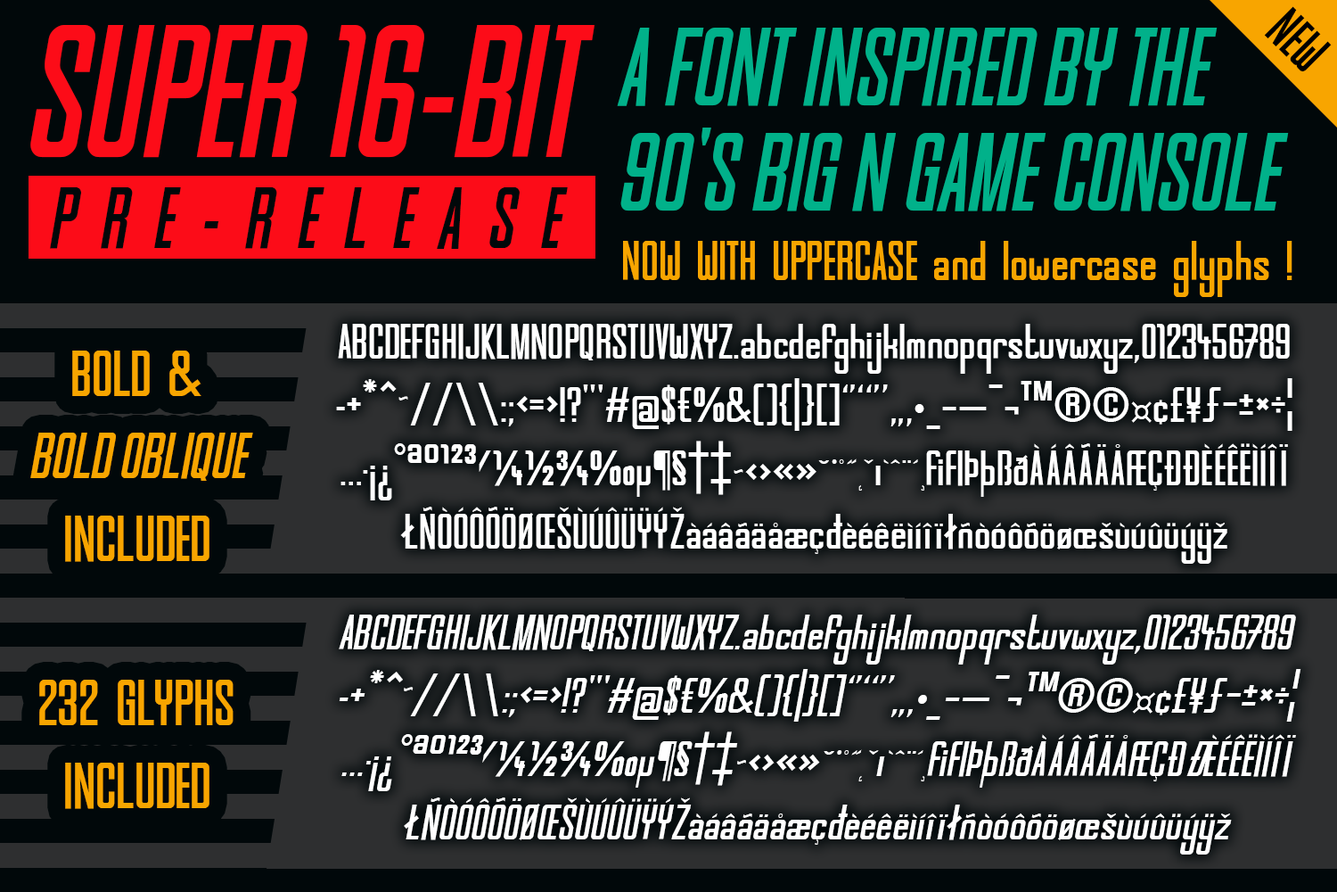
<style>
.page{position:relative;width:1337px;height:892px;background:#01080a}
.page>*{position:absolute;margin:0}
.t1{font:60.2px "Super16Bit-Bold";color:#000000}
.t2{font:196.7px "Super16Bit-BoldOblique";color:#fc0c18;scale:0.96 1}
.t3{font:116.4px/105.3px "Super16Bit-BoldOblique";color:#01b18a;text-transform:uppercase;scale:0.96 1}
.t4{font:91.3px "Super16Bit-BoldOblique";letter-spacing:0.3em;color:#01080a;scale:0.96 1}
.t5{font:58.2px "Super16Bit-Bold";color:#f8a500}
.t6{font:52.7px "Super16Bit-Bold";color:#ffffff}
.t7{font:68.6px "Super16Bit-Bold";color:#f8a500}
.t8{font:68.6px "Super16Bit-BoldOblique";color:#f8a500}
.t9{font:52.7px "Super16Bit-BoldOblique";color:#ffffff}
</style>
<div class="page">
<p class="t1" style="left:1264px;top:6px;width:68px;height:65px;rotate:45deg">NEW</p>
<p class="t2" style="left:30px;top:25px;width:565px;height:133px">SUPER 16-BIT</p>
<p class="t3" style="left:617px;top:28px;width:672px;height:183px">A font inspired by the<br>90's big N game console</p>
<p class="t4" style="left:50px;top:187px;width:518px;height:62px">PRE-RELEASE</p>
<p class="t5" style="left:623px;top:241px;width:670px;height:56px">NOW WITH UPPERCASE and lowercase glyphs !</p>
<p class="t6" style="left:336px;top:324px;width:957px;height:239px;text-align:center">ABCDEFGHIJKLMNOPQRSTUVWXYZ.abcdefghijklmnopqrstuvwxyz,0123456789<br>-+*^˜//\\:;&lt;=&gt;!?'"#@$€%&amp;(){|}[]‘’“”‚„•_–—¯¬™®©¤¢£¥ƒ−±×÷¦<br>…·¡¿°ªº¹²³⁄¼½¾‰μ¶§†‡~‹›«»˘˙˚˝˛ˇı`ˆ¨´¸ﬁﬂÞþßðÀÁÂÃÄÅÆÇÐĐÈÉÊËÌÍÎÏ<br>ŁÑÒÓÔÕÖØŒŠÙÚÛÜŸÝŽàáâãäåæçđèéêëìíîïłñòóôõöøœšùúûüýÿž</p>
<p class="t7" style="left:30px;top:350px;width:223px;height:459px;text-align:center">BOLD &amp;<br><span class="t8">BOLD OBLIQUE<br></span>INCLUDED<br><br>232 GLYPHS<br>INCLUDED</p>
<p class="t9" style="left:339px;top:614px;width:963px;height:240px;text-align:center">ABCDEFGHIJKLMNOPQRSTUVWXYZ.abcdefghijklmnopqrstuvwxyz,0123456789<br>-+*^˜//\\:;&lt;=&gt;!?'"#@$€%&amp;(){|}[]‘’“”‚„•_–—¯¬™®©¤¢£¥ƒ−±×÷¦<br>…·¡¿°ªº¹²³⁄¼½¾‰μ¶§†‡~‹›«»˘˙˚˝˛ˇı`ˆ¨´¸ﬁﬂÞþßðÀÁÂÃÄÅÆÇÐĐÈÉÊËÌÍÎÏ<br>ŁÑÒÓÔÕÖØŒŠÙÚÛÜŸÝŽàáâãäåæçđèéêëìíîïłñòóôõöøœšùúûüýÿž</p>
</div>
